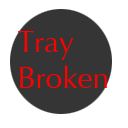
<style>
.page{position:relative;width:128px;height:128px;background:#ffffff}
.page>*{position:absolute;margin:0}
.t1{font:30px "Optima-Regular";color:#ff0000}
</style>
<div class="page">
<p class="t1" style="left:18px;top:31px;width:89px;height:57px">Tray<br>Broken</p>
</div>
